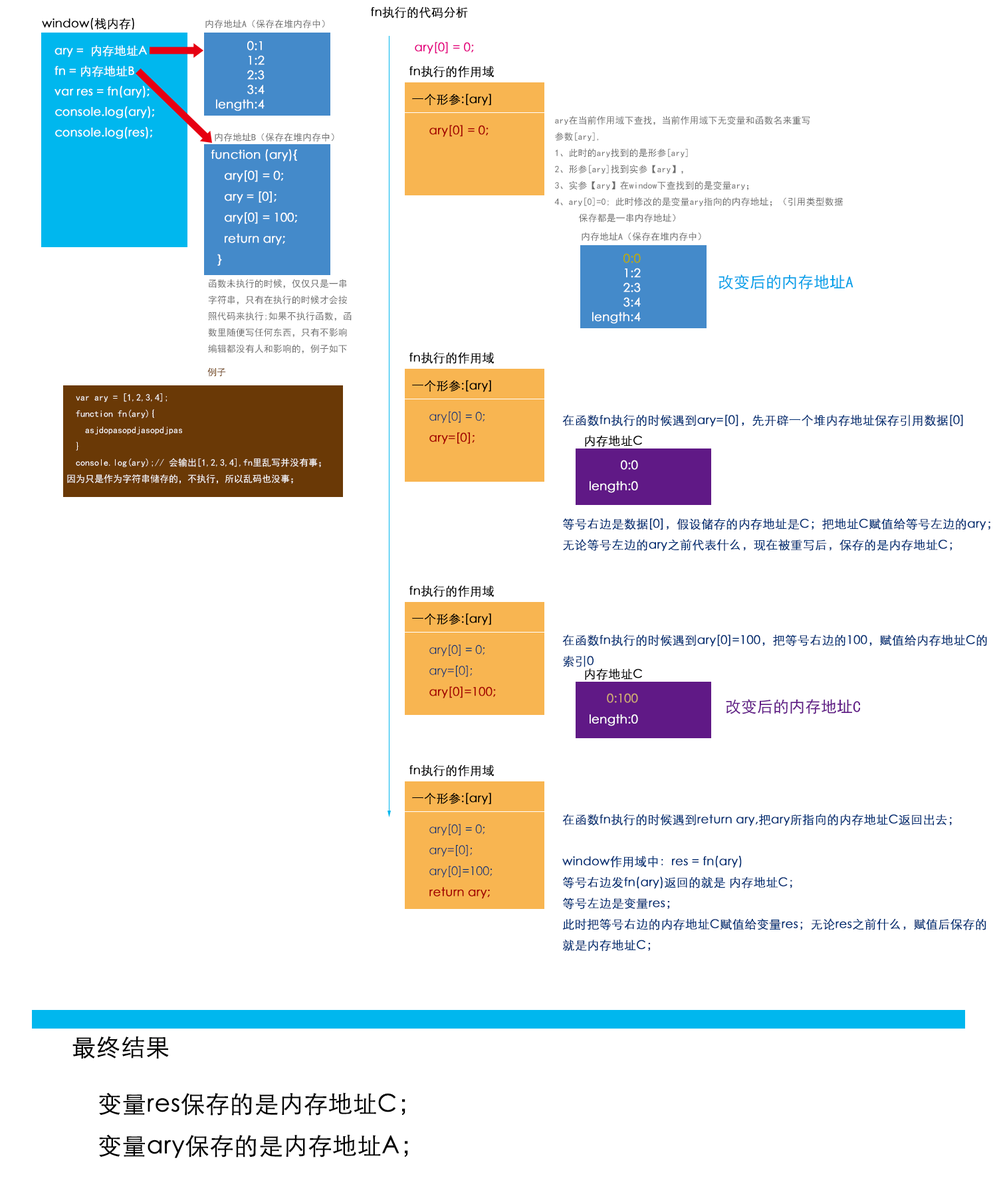
<style>
.page{position:relative;width:997px;height:1196px;background:#ffffff}
.page>*{position:absolute;margin:0}
.t1{font:12px "STXihei";color:#000000;font-weight:bold}
.t2{font:9.3px "SimHei";color:#6e6e6e}
.t3{font:12px/14.6px "STXihei";color:#ffffff;font-weight:bold}
.t4{font:12px "STXihei";color:#e4007f;font-weight:bold}
.t5{font:11.7px "STXihei";color:#ffffff;font-weight:bold}
.t6{font:12px "STXihei";color:#a40000;font-weight:bold}
.t7{font:12px "STXihei";color:#ffffff;font-weight:bold}
.t8{font:12px/14.6px "STXihei";color:#b7aa00;font-weight:bold}
.t9{font:15.9px "SimHei";color:#00a0e9}
.t10{font:9.3px "SimHei";color:#6a3906}
.t11{font:9.3px "SimHei";color:#ffffff}
.t12{font:12px "STXihei";color:#002e73}
.t13{font:12px "STXihei";color:#002e73;font-weight:bold}
.t14{font:12px "STXihei";color:#cfa972;font-weight:bold}
.t15{font:15.9px "SimHei";color:#601986}
.t16{font:23.9px "STXihei";color:#000000;font-weight:bold}
</style>
<div class="page">
<p class="t1" style="left:42px;top:18px;width:92px;height:12px">window(栈内存)</p>
<p class="t1" style="left:371px;top:7px;width:97px;height:12px">fn执行的代码分析</p>
<p class="t2" style="left:205px;top:19px;width:120px;height:10px">内存地址A（保存在堆内存中）</p>
<p class="t3" style="left:216px;top:41px;width:48px;height:70px;text-align:right">0:1<br>1:2<br>2:3<br>3:4<br>length:4</p>
<p class="t4" style="left:415px;top:42px;width:59px;height:12px">ary[0] = 0;</p>
<p class="t5" style="left:54px;top:45px;width:100px;height:94px">ary =  内存地址A<br>  fn = 内存地址B<br>  var res = fn(ary);<br>  console.log(ary);<br>  console.log(res);</p>
<p class="t1" style="left:409px;top:66px;width:85px;height:12px">fn执行的作用域</p>
<p class="t1" style="left:412px;top:94px;width:79px;height:12px">一个形参:[ary]</p>
<p class="t6" style="left:429px;top:125px;width:59px;height:12px">ary[0] = 0;</p>
<p class="t2" style="left:554px;top:116px;width:289px;height:107px">ary在当前作用域下查找，当前作用域下无变量和函数名来重写<br>参数[ary],<br>1、此时的ary找到的是形参[ary]<br>2、形参[ary]找到实参【ary】，<br>3、实参【ary】在window下查找到的是变量ary；<br>4、ary[0]=0; 此时修改的是变量ary指向的内存地址；（引用类型数据<br> 保存都是一串内存地址）</p>
<p class="t2" style="left:215px;top:133px;width:119px;height:9px">内存地址B（保存在堆内存中）</p>
<p class="t7" style="left:211px;top:149px;width:86px;height:117px">function (ary){<br>    ary[0] = 0;<br>    ary = [0];<br>    ary[0] = 100;<br>    return ary;<br>  }</p>
<p class="t2" style="left:581px;top:232px;width:120px;height:9px">内存地址A（保存在堆内存中）</p>
<p class="t3" style="left:592px;top:253px;width:49px;height:71px;text-align:right"><span class="t8">0:0<br></span>1:2<br>2:3<br>3:4<br>length:4</p>
<p class="t2" style="left:208px;top:279px;width:144px;height:75px">函数未执行的时候，仅仅只是一串字符串，只有在执行的时候才会按照代码来执行;如果不执行函数，函数里随便写任何东西，只有不影响编辑都没有人和影响的，例子如下</p>
<p class="t9" style="left:718px;top:274px;width:135px;height:16px">改变后的内存地址A</p>
<p class="t1" style="left:409px;top:352px;width:85px;height:12px">fn执行的作用域</p>
<p class="t10" style="left:207px;top:368px;width:19px;height:9px">例子</p>
<p class="t1" style="left:412px;top:380px;width:79px;height:12px">一个形参:[ary]</p>
<p class="t11" style="left:67px;top:393px;width:254px;height:91px">var ary = [1,2,3,4];<br>  function fn(ary){<br>    asjdopasopdjasopdjpas<br>  }<br>  console.log(ary);// 会输出[1,2,3,4],fn里乱写并没有事；<br>因为只是作为字符串储存的，不执行，所以乱码也没事；</p>
<p class="t12" style="left:429px;top:411px;width:55px;height:34px">ary[0] = 0;<br><span class="t6">ary=[0];</span></p>
<p class="t13" style="left:562px;top:415px;width:401px;height:12px">在函数fn执行的时候遇到ary=[0]，先开辟一个堆内存地址保存引用数据[0]</p>
<p class="t1" style="left:585px;top:435px;width:57px;height:12px">内存地址C</p>
<p class="t7" style="left:589px;top:460px;width:49px;height:33px;text-align:right">0:0<br>length:0</p>
<p class="t13" style="left:563px;top:518px;width:427px;height:34px">等号右边是数据[0]，假设储存的内存地址是C；把地址C赋值给等号左边的ary；<br>无论等号左边的ary之前代表什么，现在被重写后，保存的是内存地址C；</p>
<p class="t1" style="left:409px;top:585px;width:85px;height:12px">fn执行的作用域</p>
<p class="t1" style="left:412px;top:613px;width:79px;height:12px">一个形参:[ary]</p>
<p class="t13" style="left:562px;top:635px;width:425px;height:32px">在函数fn执行的时候遇到ary[0]=100，把等号右边的100，赋值给内存地址C的<br>索引0</p>
<p class="t12" style="left:429px;top:645px;width:67px;height:53px">ary[0] = 0;<br>ary=[0];<br><span class="t6">ary[0]=100;</span></p>
<p class="t1" style="left:585px;top:669px;width:57px;height:12px">内存地址C</p>
<p class="t7" style="left:589px;top:693px;width:49px;height:33px;text-align:right"><span class="t14">0:100<br></span>length:0</p>
<p class="t15" style="left:726px;top:699px;width:135px;height:15px">改变后的内存地址C</p>
<p class="t1" style="left:409px;top:765px;width:85px;height:12px">fn执行的作用域</p>
<p class="t1" style="left:412px;top:793px;width:79px;height:12px">一个形参:[ary]</p>
<p class="t13" style="left:562px;top:814px;width:424px;height:138px">在函数fn执行的时候遇到return ary,把ary所指向的内存地址C返回出去；<br><br>window作用域中：res = fn(ary)<br>等号右边发fn(ary)返回的就是 内存地址C；<br>等号左边是变量res；<br>此时把等号右边的内存地址C赋值给变量res；无论res之前什么，赋值后保存的<br>就是内存地址C；</p>
<p class="t12" style="left:429px;top:824px;width:63px;height:75px">ary[0] = 0;<br>ary=[0];<br>ary[0]=100;<br><span class="t6">return ary;</span></p>
<p class="t16" style="left:72px;top:1036px;width:97px;height:23px">最终结果</p>
<p class="t16" style="left:99px;top:1093px;width:309px;height:65px">变量res保存的是内存地址C；<br>变量ary保存的是内存地址A；</p>
</div>
